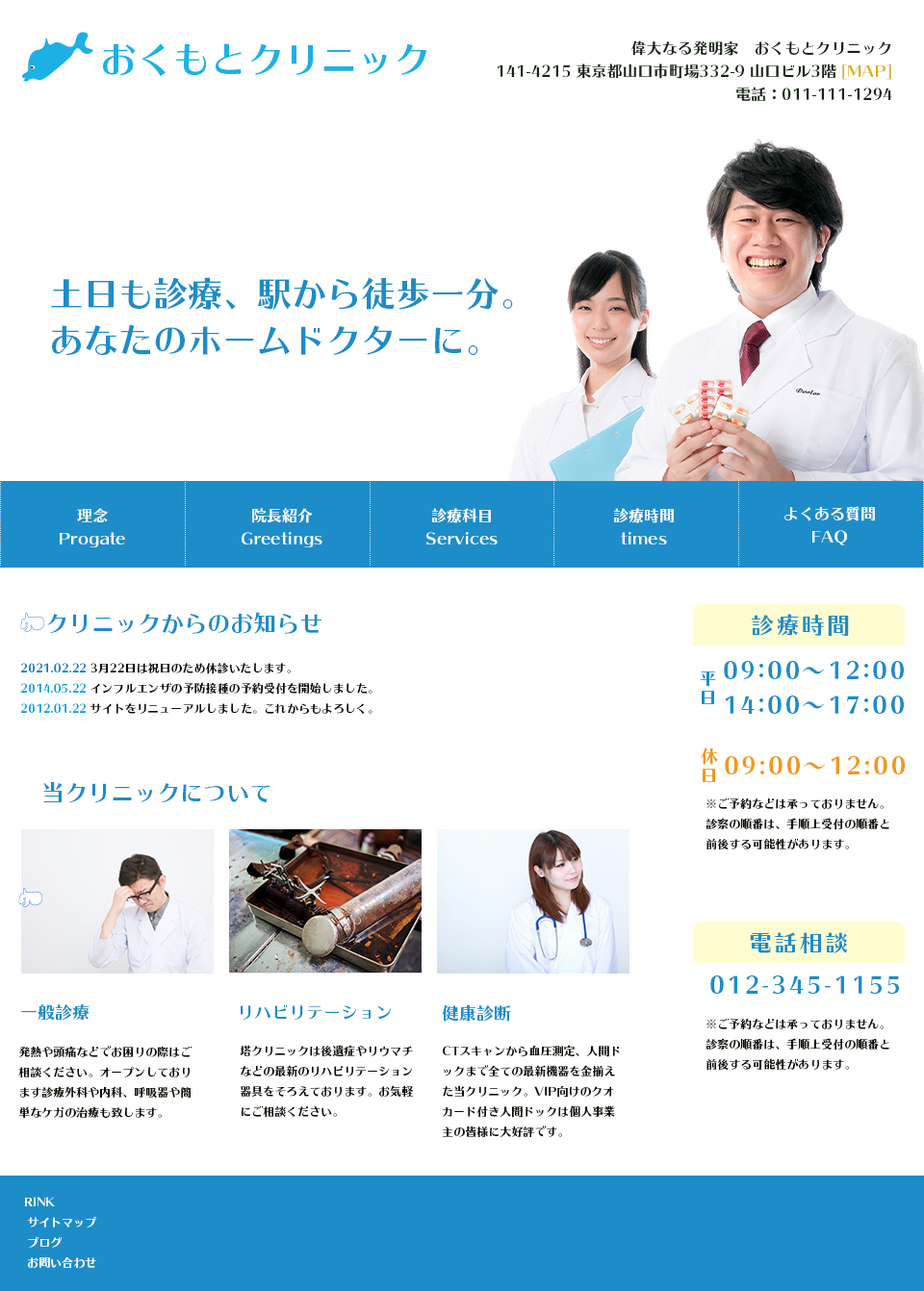
<style>
.page{position:relative;width:924px;height:1291px;background:#ffffff}
.page>*{position:absolute;margin:0}
.t1{font:15.4px/23.1px "Kan415TyposStd-Regular";color:#132510}
.t2{font:15.4px/23.1px "Kan415TyposStd-Regular";color:#d8b115}
.t3{font:34.6px/46.2px "Kan415TyposStd-Regular";color:#1c8dc9}
.t4{font:15.4px/23.1px "Kan415TyposStd-Regular";color:#ffffff}
.t5{font:23.1px "Kan415TyposStd-Regular";color:#1c8dc9}
.t6{font:23.1px "Kan415TyposStd-Regular";letter-spacing:0.1em;color:#1c8dc9}
.t7{font:11.5px "Kan415TyposStd-Regular";color:#0c0a02}
.t8{font:11.5px "Kan415TyposStd-Regular";color:#007bc7}
.t9{font:11.5px "Kan415TyposStd-Regular";color:#00a0e9}
.t10{font:23.1px/34.6px "Kan415TyposStd-Regular";letter-spacing:0.1em;color:#1c8dc9}
.t11{font:17.3px/34.6px "Kan415TyposStd-Regular";letter-spacing:0.1em;color:#1c8dc9}
.t12{font:17.3px/34.6px "Kan415TyposStd-Regular";letter-spacing:0.1em;color:#f0991c}
.t13{font:23.1px "Kan415TyposStd-Regular";letter-spacing:0.1em;color:#f0991c}
.t14{font:17.3px "Kan415TyposStd-Regular";color:#1c8dc9}
.t15{font:11.5px "Kan415TyposStd-Regular";color:#ffffff}
</style>
<div class="page">
<p class="t1" style="left:496px;top:40px;width:396px;height:61px;text-align:right">偉大なる発明家　おくもとクリニック<br>141-4215 東京都山口市町場332-9 山口ビル3階<span class="t2"> [MAP]<br></span>電話：011-111-1294</p>
<p class="t3" style="left:51px;top:277px;width:462px;height:78px">土日も診療、駅から徒歩一分。<br>あなたのホームドクターに。</p>
<p class="t4" style="left:60px;top:508px;width:65px;height:39px;text-align:center">理念<br>Progate</p>
<p class="t4" style="left:241px;top:508px;width:81px;height:39px;text-align:center">院長紹介<br>Greetings</p>
<p class="t4" style="left:425px;top:508px;width:72px;height:37px;text-align:center">診療科目<br>Services</p>
<p class="t4" style="left:613px;top:508px;width:60px;height:37px;text-align:center">診療時間<br>times</p>
<p class="t4" style="left:784px;top:506px;width:91px;height:39px;text-align:center">よくある質問<br>FAQ</p>
<p class="t5" style="left:47px;top:612px;width:274px;height:22px">クリニックからのお知らせ</p>
<p class="t6" style="left:751px;top:614px;width:98px;height:22px">診療時間</p>
<p class="t7" style="left:21px;top:663px;width:351px;height:52px"><span class="t8">2021.02.22</span> 3月22日は祝日のため休診いたします。<br><span class="t9">2014.05.22</span> インフルエンザの予防接種の予約受付を開始しました。<br><span class="t9">2012.01.22</span> サイトをリニューアルしました。これからもよろしく。</p>
<p class="t10" style="left:723px;top:661px;width:180px;height:53px">09:00～12:00<br>14:00～17:00</p>
<p class="t11" style="left:699px;top:672px;width:17px;height:32px">平日</p>
<p class="t12" style="left:700px;top:748px;width:18px;height:34px">休日</p>
<p class="t13" style="left:724px;top:756px;width:180px;height:18px">09:00～12:00</p>
<p class="t5" style="left:43px;top:781px;width:227px;height:22px">当クリニックについて</p>
<p class="t7" style="left:705px;top:798px;width:184px;height:52px">※ご予約などは承っておりません。診察の順番は、手順上受付の順番と前後する可能性があります。</p>
<p class="t6" style="left:749px;top:932px;width:99px;height:21px">電話相談</p>
<p class="t6" style="left:710px;top:976px;width:189px;height:18px">012-345-1155</p>
<p class="t14" style="left:21px;top:1003px;width:68px;height:18px">一般診療</p>
<p class="t14" style="left:241px;top:1005px;width:151px;height:15px">リハビリテーション</p>
<p class="t14" style="left:442px;top:1004px;width:69px;height:18px">健康診断</p>
<p class="t7" style="left:705px;top:1018px;width:184px;height:53px">※ご予約などは承っておりません。診察の順番は、手順上受付の順番と前後する可能性があります。</p>
<p class="t7" style="left:18px;top:1046px;width:173px;height:73px">発熱や頭痛などでお困りの際はご相談ください。オープンしております診療外科や内科、呼吸器や簡単なケガの治療も致します。</p>
<p class="t7" style="left:240px;top:1045px;width:174px;height:73px">塔クリニックは後遺症やリウマチなどの最新のリハビリテーション器具をそろえております。お気軽にご相談ください。</p>
<p class="t7" style="left:442px;top:1045px;width:178px;height:92px">CTスキャンから血圧測定、人間ドックまで全ての最新機器を金揃えた当クリニック。VIP向けのクオカード付き人間ドックは個人事業主の皆様に大好評です。</p>
<p class="t15" style="left:25px;top:1197px;width:71px;height:71px">RINK<br> サイトマップ<br> ブログ<br> お問い合わせ</p>
</div>
